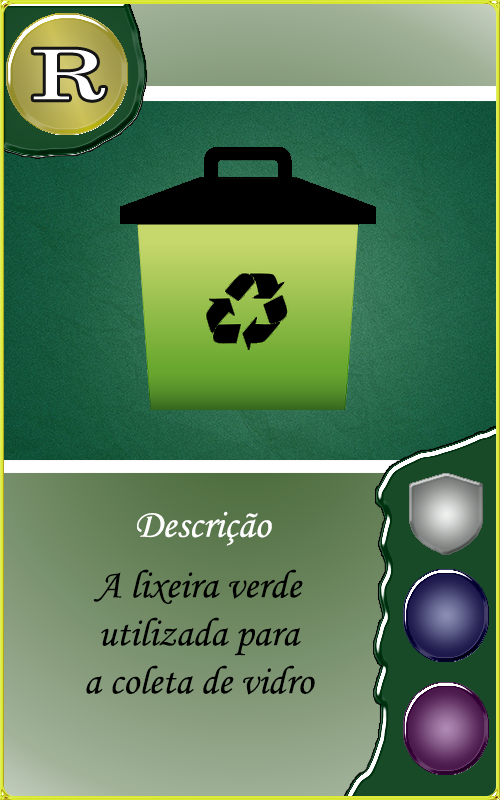
<style>
.page{position:relative;width:500px;height:800px}
.page>*{position:absolute;margin:0}
.t1{font:40px "MonotypeCorsiva";color:#fffefe}
.t2{font:40px "MonotypeCorsiva";color:#000000}
</style>
<div class="page">
<p class="t1" style="left:137px;top:511px;width:135px;height:35px">Descrição</p>
<p class="t2" style="left:86px;top:569px;width:229px;height:126px;text-align:center">A lixeira verde<br>utilizada para<br>a coleta de vidro</p>
</div>
